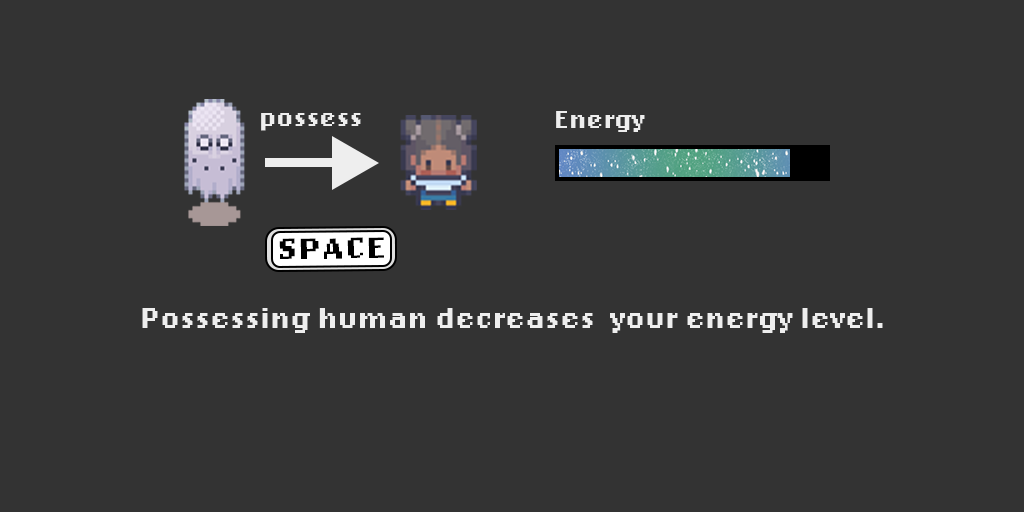
<style>
.page{position:relative;width:1024px;height:512px;background:#333333}
.page>*{position:absolute;margin:0}
.t1{font:25.9px "LoRes12OT-Bold";color:#eeeeee}
.t2{font:30.3px "LoRes12OT-Bold";color:#000000;scale:1.18 1}
.t3{font:30px "LoRes12OT-Bold";color:#eeeeee}
</style>
<div class="page">
<p class="t1" style="left:261px;top:113px;width:100px;height:18px">possess</p>
<p class="t1" style="left:556px;top:111px;width:89px;height:21px">Energy</p>
<p class="t2" style="left:279px;top:237px;width:105px;height:22px;rotate:-1deg">SPACE</p>
<p class="t3" style="left:142px;top:308px;width:741px;height:25px">Possessing human decreases  your energy level.</p>
</div>
